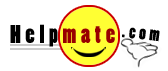
<style>
.page{position:relative;width:168px;height:71px;background:#ffffff}
.page>*{position:absolute;margin:0}
.t1{font:24px "PoplarStd";letter-spacing:0.2em;color:#000000}
.t2{font:24px "PoplarStd";letter-spacing:0.2em;color:#990000}
.t3{font:18px "PoplarStd";letter-spacing:0.2em;color:#000000}
</style>
<div class="page">
<p class="t1" style="left:10px;top:24px;width:105px;height:23px">Help<span class="t2">mate</span></p>
<p class="t3" style="left:122px;top:27px;width:38px;height:15px;rotate:7deg">.com</p>
</div>
